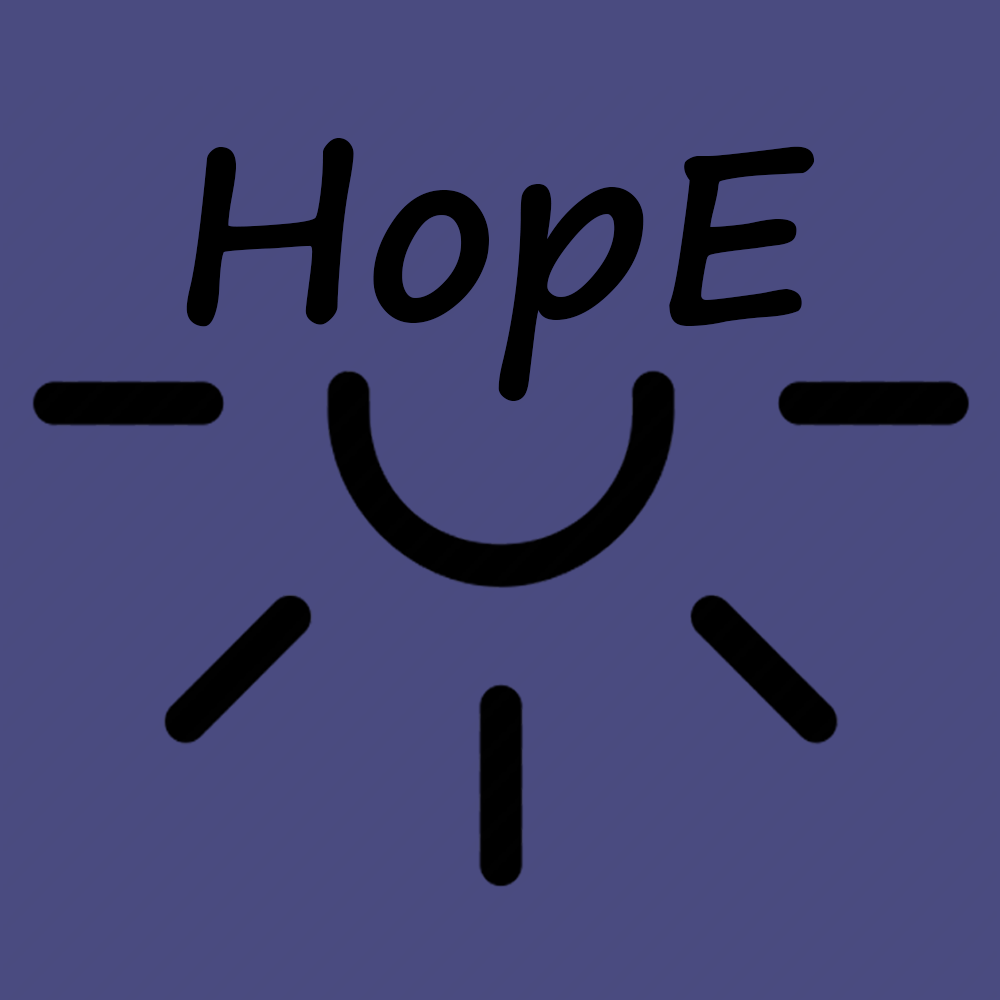
<style>
.page{position:relative;width:1000px;height:1000px;background:#4a4b80}
.page>*{position:absolute;margin:0}
.t1{font:240px "SegoePrint-Bold";color:#000000}
</style>
<div class="page">
<p class="t1" style="left:186px;top:138px;width:629px;height:263px">HopE</p>
</div>
